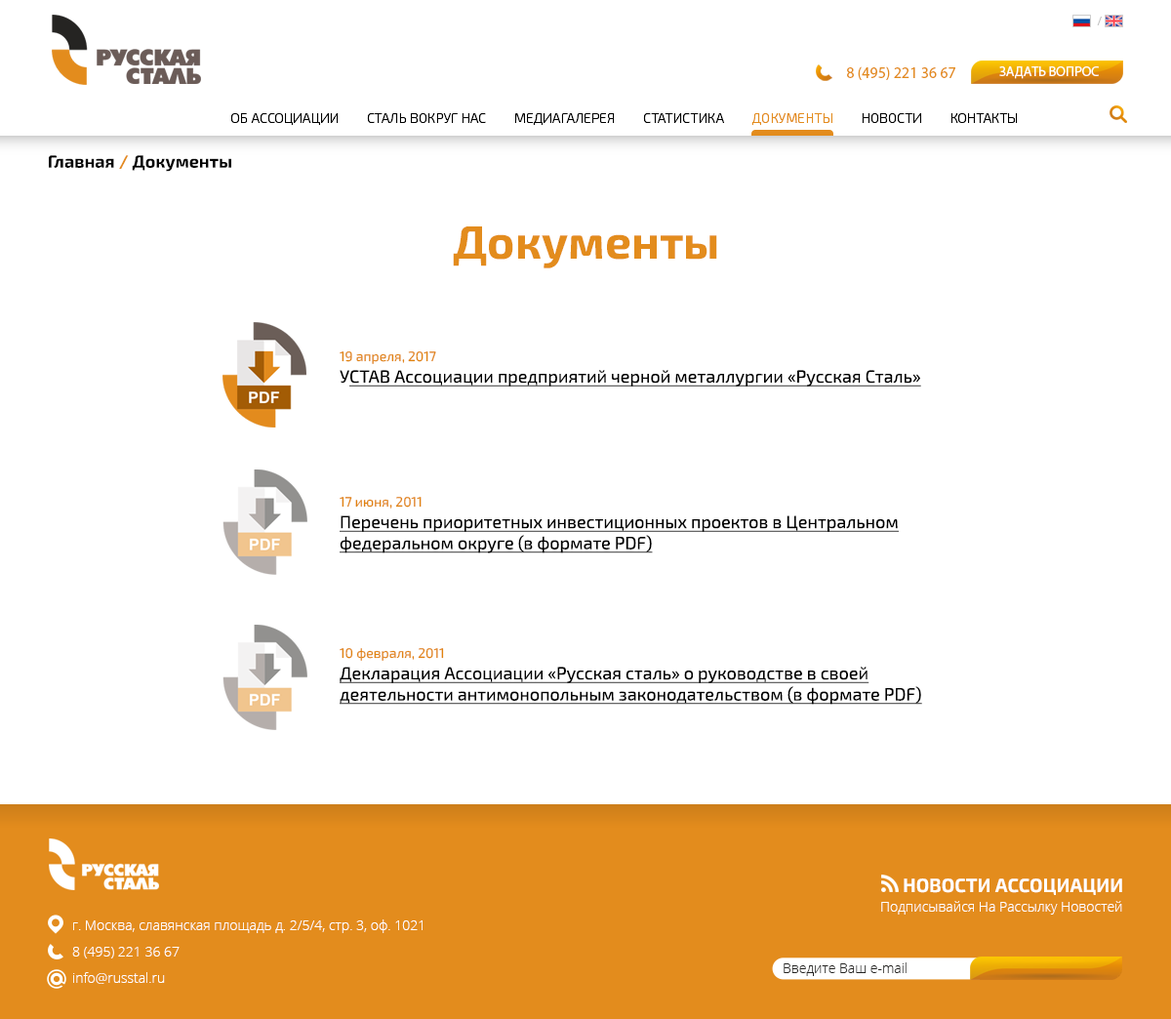
<style>
.page{position:relative;width:1171px;height:1019px;background:#ffffff}
.page>*{position:absolute;margin:0}
.t1{font:11.7px "Exo2.0-Medium";color:#c3c3c3}
.t2{font:15.6px "Exo2.0-Light";color:#e38c1d}
.t3{font:13.8px "Exo2.0-Light";color:#ffffff}
.t4{font:13.7px "Exo2.0-Light";color:#000000}
.t5{font:13.7px "Exo2.0-Light";color:#e38c1d}
.t6{font:17.6px "Exo2.0-Bold";color:#000000}
.t7{font:17.6px "Exo2.0-Bold";color:#e38c1d}
.t8{font:46.8px "Exo2.0-Bold";color:#e38c1d}
.t9{font:13.7px "Exo2.0-Regular";color:#e1840e}
.t10{font:17.6px "Exo2.0-Regular";color:#000000;text-decoration:underline}
.t11{font:17.6px "Exo2.0-Regular";color:#000000}
.t12{font:19.2px "Exo2.0-Bold";color:#ffffff}
.t13{font:13.7px "OpenSans-Light";color:#ffffff}
.t14{font:13.7px/26.3px "OpenSans-Light";color:#ffffff}
.t15{font:13.7px "OpenSans-Light";color:#252422}
</style>
<div class="page">
<p class="t1" style="left:1097px;top:17px;width:4px;height:8px">/</p>
<p class="t2" style="left:847px;top:66px;width:108px;height:14px">8 (495) 221 36 67</p>
<p class="t3" style="left:999px;top:66px;width:100px;height:13px">ЗАДАТЬ ВОПРОС</p>
<p class="t4" style="left:230px;top:112px;width:788px;height:14px">ОБ АССОЦИАЦИИ         СТАЛЬ ВОКРУГ НАС         МЕДИАГАЛЕРЕЯ         СТАТИСТИКА         <span class="t5">ДОКУМЕНТЫ</span>         НОВОСТИ         КОНТАКТЫ</p>
<p class="t6" style="left:49px;top:155px;width:182px;height:17px">Главная <span class="t7">/</span> Документы</p>
<p class="t8" style="left:453px;top:226px;width:264px;height:42px">Документы</p>
<p class="t9" style="left:340px;top:351px;width:96px;height:13px">19 апреля, 2017</p>
<p class="t10" style="left:340px;top:370px;width:581px;height:16px"><span class="t11">У</span>СТАВ Ассоциации предприятий черной металлургии «Русская Сталь»</p>
<p class="t9" style="left:340px;top:497px;width:81px;height:11px">17 июня, 2011</p>
<p class="t10" style="left:340px;top:515px;width:559px;height:38px">Перечень приоритетных инвестиционных проектов в Центральном федеральном округе (в формате PDF)</p>
<p class="t9" style="left:340px;top:648px;width:104px;height:12px">10 февраля, 2011</p>
<p class="t10" style="left:340px;top:666px;width:582px;height:38px">Декларация Ассоциации «Русская сталь» о руководстве в своей деятельности антимонопольным законодательством (в формате PDF)</p>
<p class="t12" style="left:903px;top:878px;width:219px;height:17px">НОВОСТИ АССОЦИАЦИИ</p>
<p class="t13" style="left:881px;top:900px;width:241px;height:14px">Подписывайся На Рассылку Новостей</p>
<p class="t14" style="left:72px;top:919px;width:350px;height:64px">г. Москва, славянская площадь д. 2/5/4, стр. 3, оф. 1021<br>8 (495) 221 36 67<br>info@russtal.ru</p>
<p class="t15" style="left:783px;top:962px;width:123px;height:14px">Введите Ваш e-mail</p>
</div>
